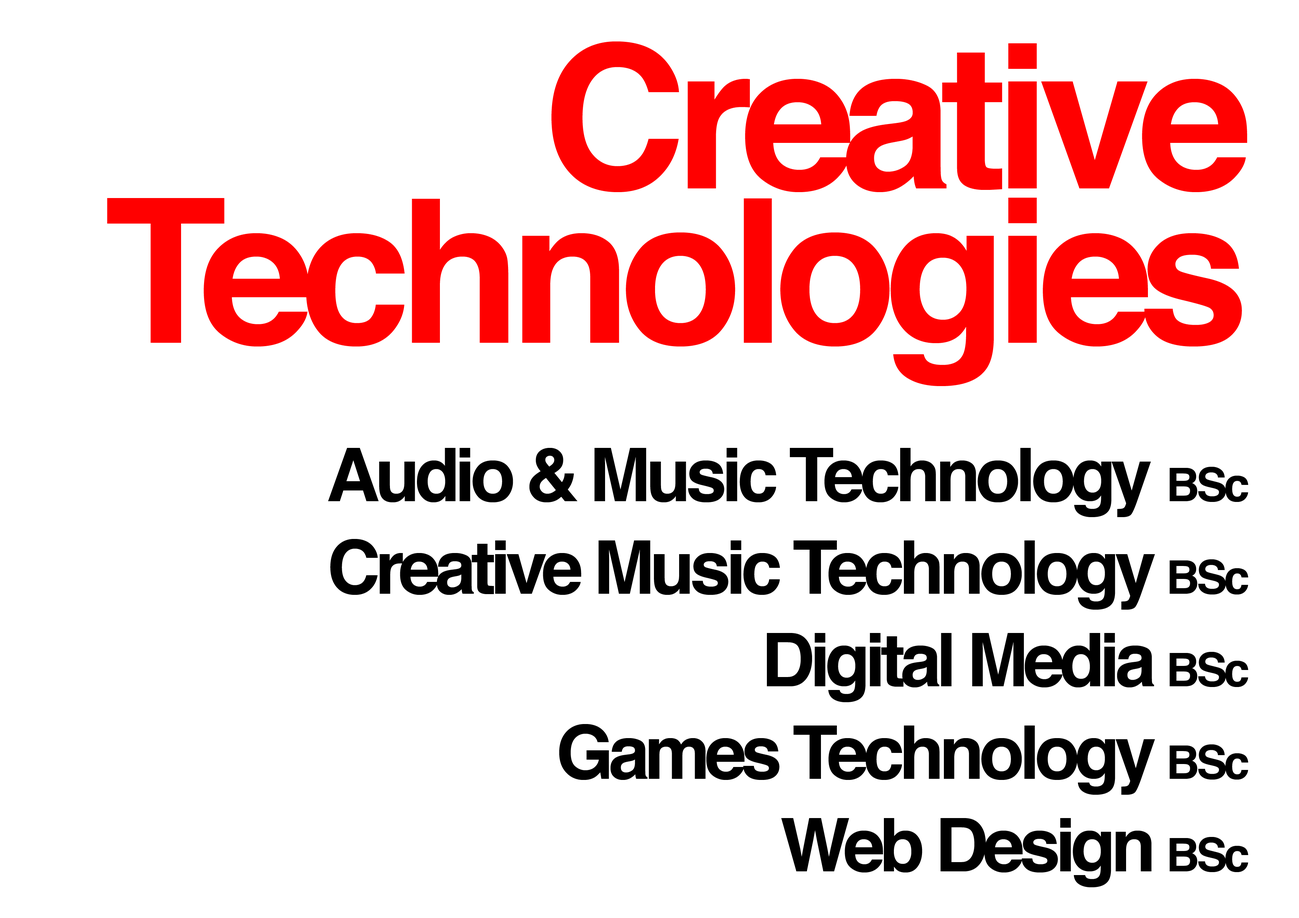
<style>
.page{position:relative;width:1299px;height:918px;background:#ffffff}
.page>*{position:absolute;margin:0}
.t1{font:200.5px/154.3px "Helvetica-Bold";letter-spacing:-0.06em;color:#ff0000}
.t2{font:74px/92.6px "Helvetica-Bold";letter-spacing:-0.07em;color:#000000}
.t3{font:46.3px/92.6px "Helvetica-Bold";letter-spacing:-0.07em;color:#000000}
</style>
<div class="page">
<p class="t1" style="left:107px;top:41px;width:1140px;height:345px;text-align:right">Creative Technologies</p>
<p class="t2" style="left:328px;top:448px;width:920px;height:439px;text-align:right">Audio &amp; Music Technology <span class="t3">BSc<br></span>Creative Music Technology <span class="t3">BSc<br></span>Digital Media <span class="t3">BSc<br></span>Games Technology <span class="t3">BSc<br></span>Web Design <span class="t3">BSc</span></p>
</div>
